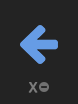
<style>
.page{position:relative;width:78px;height:104px;background:#232323}
.page>*{position:absolute;margin:0}
.t1{font:14px "SegoeUI";color:#7c7c7c;font-weight:bold}
</style>
<div class="page">
<p class="t1" style="left:28px;top:82px;width:10px;height:11px">X</p>
</div>
